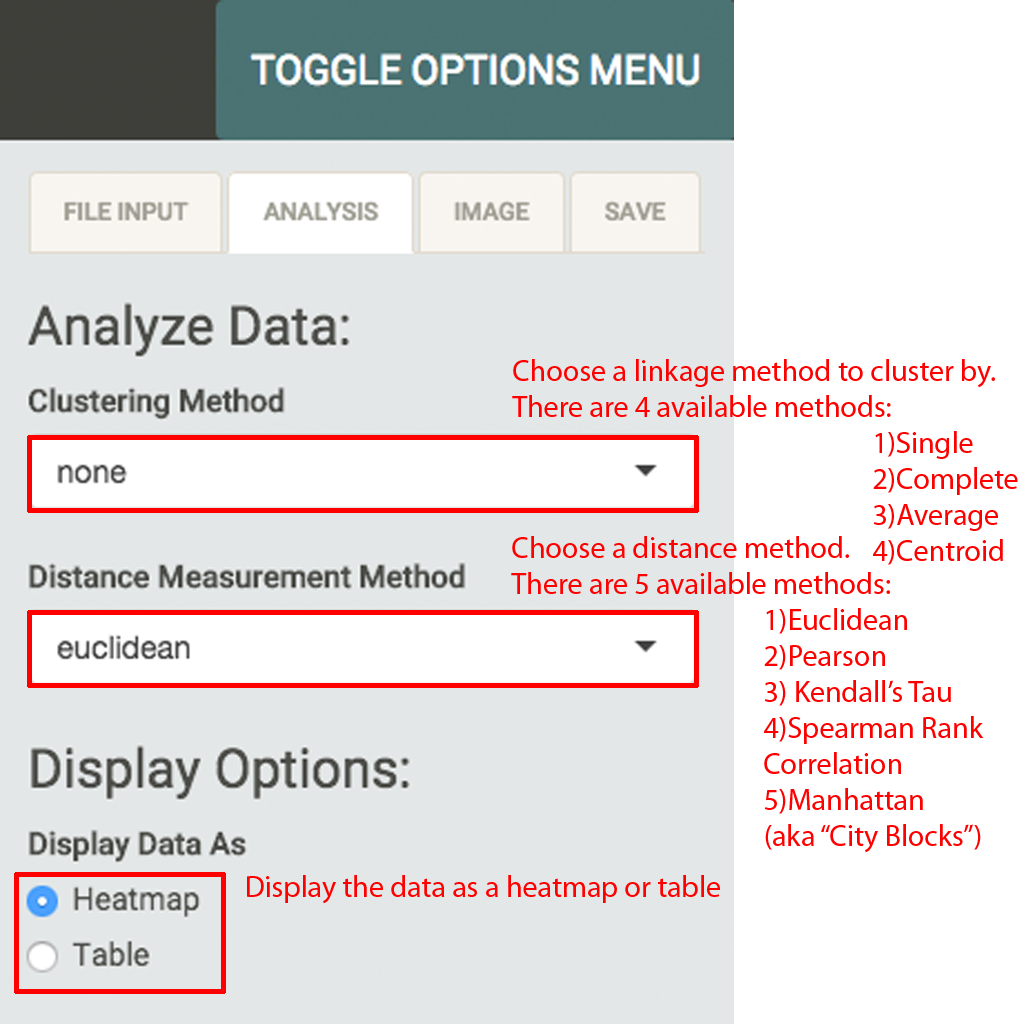
<style>
.page{position:relative;width:1024px;height:1024px;background:#ffffff}
.page>*{position:absolute;margin:0}
.t1{font:30px "MyriadPro-Regular";color:#ff0000}
</style>
<div class="page">
<p class="t1" style="left:512px;top:359px;width:506px;height:206px">Choose a linkage method to cluster by. <br>There are 4 available methods:   <br>          1)Single   <br>          2)Complete <br>          3)Average <br>          4)Centroid</p>
<p class="t1" style="left:511px;top:536px;width:473px;height:317px">Choose a distance method. <br>There are 5 available methods: <br>       1)Euclidean<br>       2)Pearson<br>       3) Kendall’s Tau<br>       4)Spearman Rank <br>       Correlation<br>       5)Manhattan <br>       (aka “City Blocks”)</p>
<p class="t1" style="left:247px;top:875px;width:473px;height:29px">Display the data as a heatmap or table</p>
</div>
